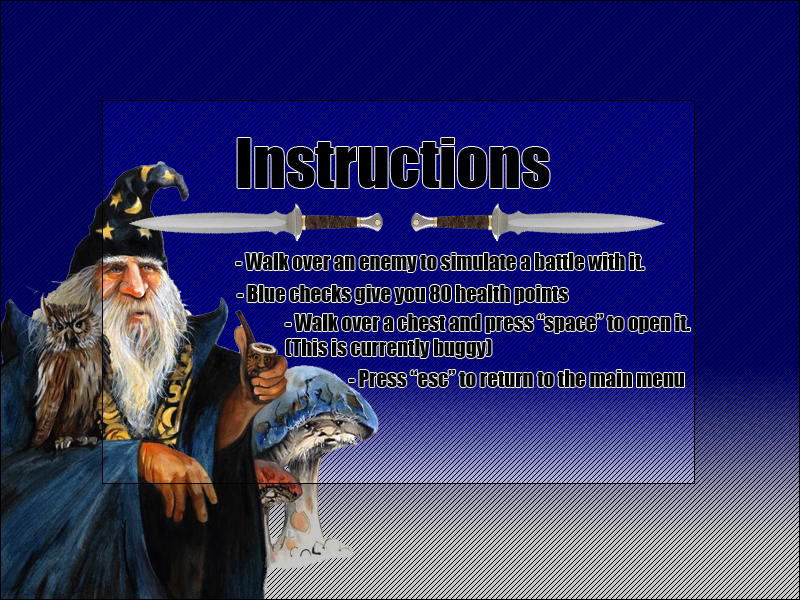
<style>
.page{position:relative;width:800px;height:600px;background:#000272}
.page>*{position:absolute;margin:0}
.t1{font:62.5px "Impact";color:#000000}
.t2{font:20.8px "Impact";color:#000000}
</style>
<div class="page">
<p class="t1" style="left:237px;top:138px;width:313px;height:50px">Instructions</p>
<p class="t2" style="left:236px;top:253px;width:409px;height:19px">- Walk over an enemy to simulate a battle with it.</p>
<p class="t2" style="left:237px;top:285px;width:331px;height:19px">- Blue checks give you 80 health points</p>
<p class="t2" style="left:285px;top:314px;width:405px;height:44px">- Walk over a chest and press “space” to open it.<br>(This is currently buggy)</p>
<p class="t2" style="left:349px;top:370px;width:335px;height:17px">- Press “esc” to return to the main menu</p>
</div>
